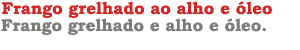
<style>
.page{position:relative;width:300px;height:50px;background:#ffffff}
.page>*{position:absolute;margin:0}
.t1{font:17px "BookmanOldStyle-Bold";color:#d42525}
.t2{font:17px "BookmanOldStyle-Bold";color:#7c7c79}
</style>
<div class="page">
<p class="t1" style="left:2px;top:1px;width:270px;height:17px">Frango grelhado ao alho e óleo</p>
<p class="t2" style="left:1px;top:18px;width:265px;height:17px">Frango grelhado e alho e óleo.</p>
</div>
